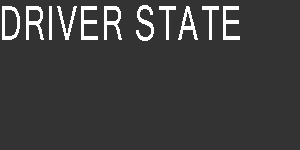
<style>
.page{position:relative;width:300px;height:150px;background:#333333}
.page>*{position:absolute;margin:0}
.t1{font:46.9px "MicrosoftSansSerif";letter-spacing:0.05em;color:#ffffff;scale:0.67 1}
</style>
<div class="page">
<p class="t1" style="left:2px;top:5px;width:238px;height:36px">DRIVER STATE</p>
</div>
